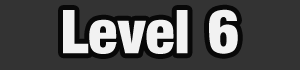
<style>
.page{position:relative;width:300px;height:70px;background:#333333}
.page>*{position:absolute;margin:0}
.t1{font:60px "Harvest";color:#f2f2f2}
</style>
<div class="page">
<p class="t1" style="left:63px;top:9px;width:175px;height:45px">Level 6</p>
</div>
